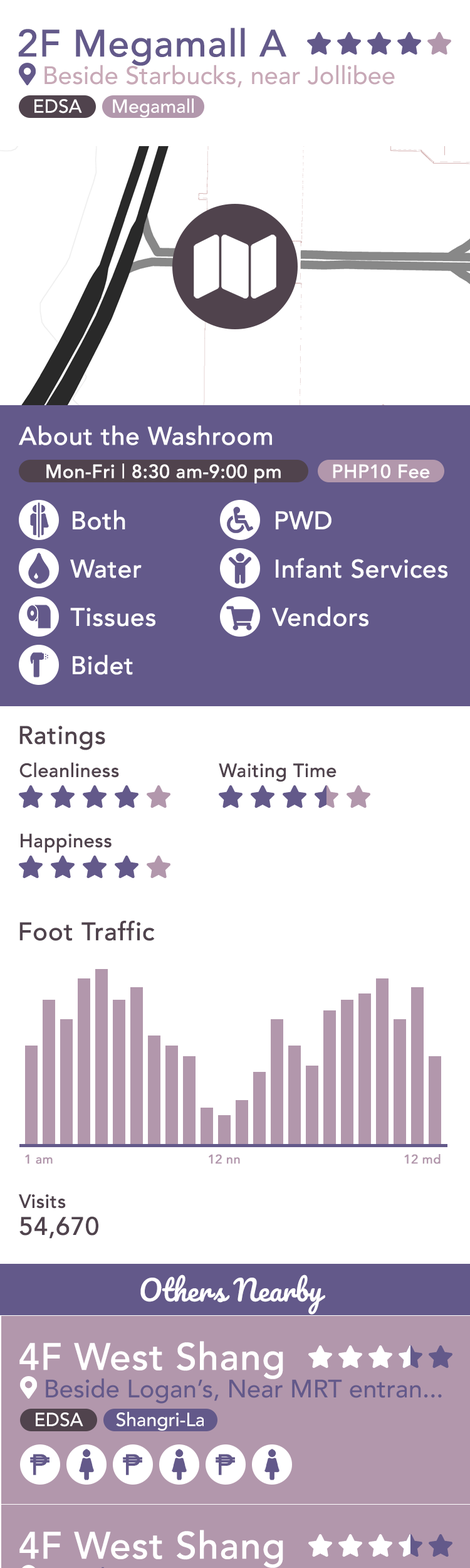
<style>
.page{position:relative;width:470px;height:1568px;background:#ffffff}
.page>*{position:absolute;margin:0}
.t1{font:37.6px "Avenir-Medium";color:#63598a;font-weight:bold}
.t2{font:25.1px "Avenir-Medium";color:#c8a9b7}
.t3{font:18.8px "Avenir-Medium";color:#ffffff}
.t4{font:25.1px "Avenir-Medium";color:#ffffff;font-weight:bold}
.t5{font:18.8px "Avenir-Medium";color:#fefefe;font-weight:bold}
.t6{font:25.1px "Avenir-Medium";color:#50434d;font-weight:bold}
.t7{font:18.8px "Avenir-Medium";color:#50434d;font-weight:bold}
.t8{font:12.5px "Avenir-Medium";color:#b297ac;font-weight:bold}
.t9{font:28.2px "Pacifico-Regular";color:#ffffff}
.t10{font:37.6px "Avenir-Medium";color:#ffffff;font-weight:bold}
.t11{font:25.1px "Avenir-Medium";color:#63598a}
</style>
<div class="page">
<p class="t1" style="left:18px;top:28px;width:269px;height:38px">2F Megamall A</p>
<p class="t2" style="left:45px;top:65px;width:350px;height:23px">Beside Starbucks, near Jollibee</p>
<p class="t3" style="left:34px;top:99px;width:48px;height:15px">EDSA</p>
<p class="t3" style="left:113px;top:98px;width:81px;height:19px">Megamall</p>
<p class="t4" style="left:19px;top:425px;width:253px;height:20px">About the Washroom</p>
<p class="t5" style="left:46px;top:464px;width:235px;height:20px">Mon-Fri | 8:30 am-9:00 pm</p>
<p class="t5" style="left:333px;top:464px;width:97px;height:15px">PHP10 Fee</p>
<p class="t4" style="left:73px;top:510px;width:52px;height:20px">Both</p>
<p class="t4" style="left:276px;top:511px;width:56px;height:18px">PWD</p>
<p class="t4" style="left:276px;top:558px;width:172px;height:20px">Infant Services</p>
<p class="t4" style="left:70px;top:559px;width:72px;height:19px">Water</p>
<p class="t4" style="left:70px;top:608px;width:86px;height:19px">Tissues</p>
<p class="t4" style="left:272px;top:607px;width:97px;height:20px">Vendors</p>
<p class="t4" style="left:73px;top:655px;width:60px;height:20px">Bidet</p>
<p class="t6" style="left:19px;top:726px;width:86px;height:24px">Ratings</p>
<p class="t7" style="left:19px;top:762px;width:100px;height:16px">Cleanliness</p>
<p class="t7" style="left:219px;top:763px;width:118px;height:19px">Waiting Time</p>
<p class="t7" style="left:21px;top:834px;width:91px;height:19px">Happiness</p>
<p class="t6" style="left:19px;top:921px;width:136px;height:20px">Foot Traffic</p>
<p class="t8" style="left:25px;top:1154px;width:28px;height:10px">1 am</p>
<p class="t8" style="left:209px;top:1154px;width:31px;height:10px">12 nn</p>
<p class="t8" style="left:405px;top:1154px;width:36px;height:10px">12 md</p>
<p class="t7" style="left:19px;top:1194px;width:47px;height:15px">Visits</p>
<p class="t6" style="left:19px;top:1216px;width:79px;height:23px">54,670</p>
<p class="t9" style="left:140px;top:1274px;width:186px;height:41px">Others Nearby</p>
<p class="t10" style="left:19px;top:1341px;width:264px;height:38px">4F West Shang</p>
<p class="t11" style="left:46px;top:1378px;width:396px;height:26px">Beside Logan’s, Near MRT entran...</p>
<p class="t3" style="left:36px;top:1412px;width:47px;height:15px">EDSA</p>
<p class="t3" style="left:116px;top:1412px;width:88px;height:19px">Shangri-La</p>
<p class="t10" style="left:19px;top:1530px;width:264px;height:38px">4F West Shang</p>
</div>
